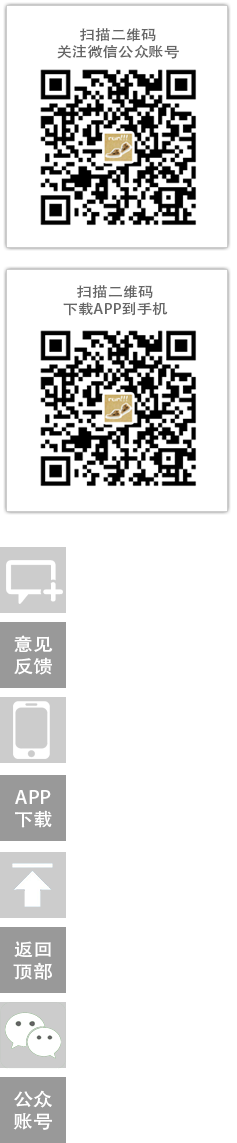
<style>
.page{position:relative;width:237px;height:1143px;background:#ffffff}
.page>*{position:absolute;margin:0}
.t1{font:14px "AdobeHeitiStd-Regular";color:#666666;scale:1.1 1}
.t2{font:18px "AdobeHeitiStd-Regular";color:#ffffff;scale:1.1 1}
</style>
<div class="page">
<p class="t1" style="left:57px;top:28px;width:122px;height:31px;text-align:center">扫描二维码<br>关注微信公众账号</p>
<p class="t1" style="left:63px;top:285px;width:105px;height:31px;text-align:center">扫描二维码<br>下载APP到手机</p>
<p class="t2" style="left:14px;top:635px;width:39px;height:40px;text-align:center">意见<br>反馈</p>
<p class="t2" style="left:15px;top:790px;width:37px;height:38px;text-align:center">APP<br>下载</p>
<p class="t2" style="left:13px;top:941px;width:39px;height:39px;text-align:center">返回<br>顶部</p>
<p class="t2" style="left:13px;top:1090px;width:39px;height:40px;text-align:center">公众<br>账号</p>
</div>
